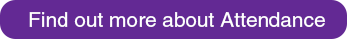
<style>
.page{position:relative;width:347px;height:39px;background:#632994}
.page>*{position:absolute;margin:0}
.t1{font:20.8px "HelveticaCE";color:#ffffff}
</style>
<div class="page">
<p class="t1" style="left:29px;top:12px;width:296px;height:15px">Find out more about Attendance</p>
</div>
